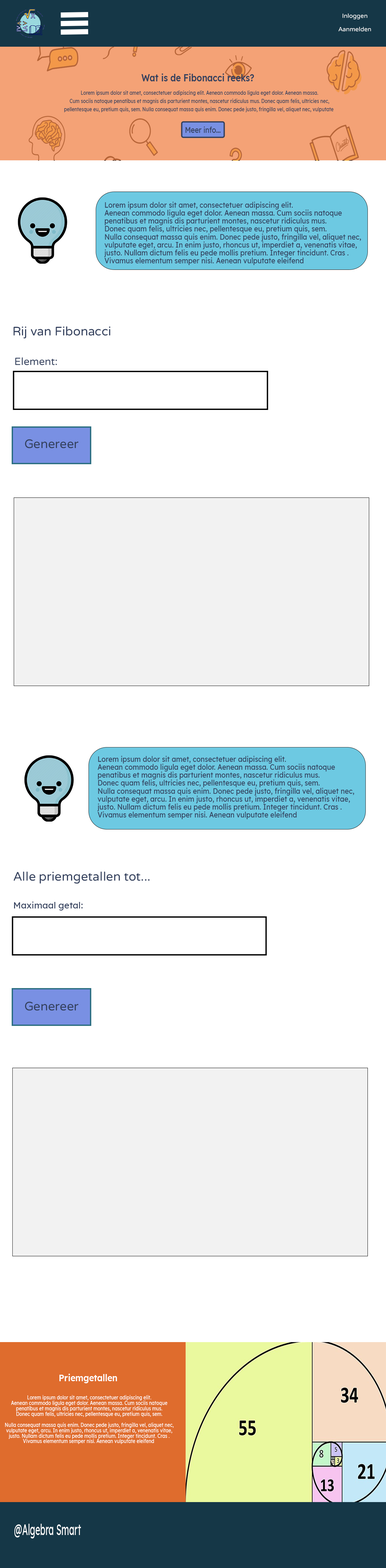
<style>
.page{position:relative;width:386px;height:1568px;background:#ffffff}
.page>*{position:absolute;margin:0}
.t1{font:6px/13.2px "VarelaRound-Regular";color:#ffffff}
.t2{font:10.3px "Lexend-SemiBold";color:#34415e;scale:0.83 1}
.t3{font:5.5px/8.2px "Lexend-Medium";color:#34415e;scale:0.83 1}
.t4{font:8.2px "Lexend-Medium";color:#34415e;scale:0.83 1}
.t5{font:8px/8px "Lexend-Medium";color:#34415e;scale:0.86 1}
.t6{font:12.4px "VarelaRound-Regular";color:#34415e}
.t7{font:10.3px "VarelaRound-Regular";color:#34415e}
.t8{font:8.9px "Lexend-Medium";color:#34415e}
.t9{font:9.5px "Lexend-SemiBold";color:#ffffff;scale:0.89 1}
.t10{font:5.5px/5.5px "Lexend-Medium";color:#ffffff;scale:0.83 1}
.t11{font:15.1px "Lexend-Medium";color:#ffffff;scale:0.55 1}
</style>
<div class="page">
<p class="t1" style="left:339px;top:13px;width:32px;height:19px;text-align:center">Inloggen<br>Aanmelden</p>
<p class="t2" style="left:141px;top:73px;width:113px;height:8px">Wat is de Fibonacci reeks?</p>
<p class="t3" style="left:64px;top:90px;width:270px;height:22px;text-align:center">Lorem ipsum dolor sit amet, consectetuer adipiscing elit. Aenean commodo ligula eget dolor. Aenean massa.<br>Cum sociis natoque penatibus et magnis dis parturient montes, nascetur ridiculus mus. Donec quam felis, ultricies nec,<br>pellentesque eu, pretium quis, sem. Nulla consequat massa quis enim. Donec pede justo, fringilla vel, aliquet nec, vulputate</p>
<p class="t4" style="left:185px;top:126px;width:36px;height:7px">Meer info...</p>
<p class="t5" style="left:104px;top:202px;width:257px;height:63px">Lorem ipsum dolor sit amet, consectetuer adipiscing elit.<br>Aenean commodo ligula eget dolor. Aenean massa. Cum sociis natoque<br>penatibus et magnis dis parturient montes, nascetur ridiculus mus.<br>Donec quam felis, ultricies nec, pellentesque eu, pretium quis, sem.<br>Nulla consequat massa quis enim. Donec pede justo, fringilla vel, aliquet nec,<br>vulputate eget, arcu. In enim justo, rhoncus ut, imperdiet a, venenatis vitae,<br>justo. Nullam dictum felis eu pede mollis pretium. Integer tincidunt. Cras .<br>Vivamus elementum semper nisi. Aenean vulputate eleifend</p>
<p class="t6" style="left:13px;top:326px;width:98px;height:13px">Rij van Fibonacci</p>
<p class="t7" style="left:15px;top:357px;width:42px;height:8px">Element:</p>
<p class="t6" style="left:25px;top:439px;width:54px;height:9px">Genereer</p>
<p class="t5" style="left:97px;top:756px;width:257px;height:63px">Lorem ipsum dolor sit amet, consectetuer adipiscing elit.<br>Aenean commodo ligula eget dolor. Aenean massa. Cum sociis natoque<br>penatibus et magnis dis parturient montes, nascetur ridiculus mus.<br>Donec quam felis, ultricies nec, pellentesque eu, pretium quis, sem.<br>Nulla consequat massa quis enim. Donec pede justo, fringilla vel, aliquet nec,<br>vulputate eget, arcu. In enim justo, rhoncus ut, imperdiet a, venenatis vitae,<br>justo. Nullam dictum felis eu pede mollis pretium. Integer tincidunt. Cras .<br>Vivamus elementum semper nisi. Aenean vulputate eleifend</p>
<p class="t6" style="left:14px;top:871px;width:136px;height:13px">Alle priemgetallen tot...</p>
<p class="t8" style="left:14px;top:902px;width:69px;height:9px">Maximaal getal:</p>
<p class="t6" style="left:25px;top:1002px;width:54px;height:9px">Genereer</p>
<p class="t9" style="left:59px;top:1374px;width:58px;height:9px">Priemgetallen</p>
<p class="t10" style="left:5px;top:1395px;width:169px;height:49px;text-align:center">Lorem ipsum dolor sit amet, consectetuer adipiscing elit.<br>Aenean commodo ligula eget dolor. Aenean massa. Cum sociis natoque<br>penatibus et magnis dis parturient montes, nascetur ridiculus mus.<br>Donec quam felis, ultricies nec, pellentesque eu, pretium quis, sem.<br><br>Nulla consequat massa quis enim. Donec pede justo, fringilla vel, aliquet nec,<br>vulputate eget, arcu. In enim justo, rhoncus ut, imperdiet a, venenatis vitae,<br>justo. Nullam dictum felis eu pede mollis pretium. Integer tincidunt. Cras .<br>Vivamus elementum semper nisi. Aenean vulputate eleifend</p>
<p class="t11" style="left:14px;top:1524px;width:67px;height:14px">@Algebra Smart</p>
</div>
